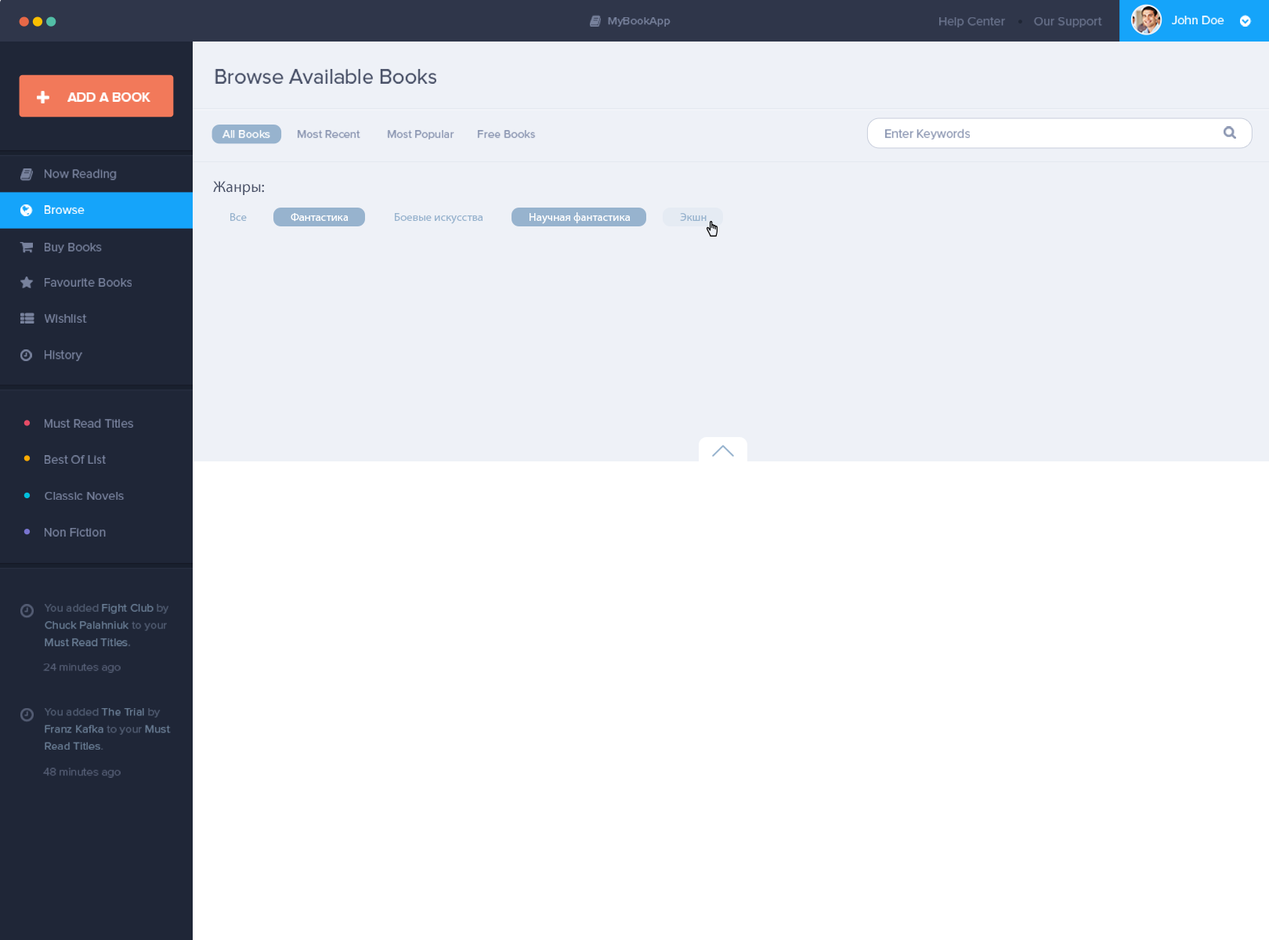
<style>
.page{position:relative;width:1269px;height:940px;background:#ffffff}
.page>*{position:absolute;margin:0}
.t1{font:11.4px "ProximaNova-Regular";color:#78829d}
.t2{font:12.4px "ProximaNova-Regular";color:#78829d}
.t3{font:12.4px "ProximaNova-Regular";color:#ffffff}
.t4{font:21px "ProximaNova-Regular";color:#444c63}
.t5{font:13.3px "ProximaNova-Bold";color:#ffffff;text-transform:uppercase}
.t6{font:11.4px "ProximaNova-Regular";color:#8c97b2}
.t7{font:11.4px "ProximaNova-Regular";color:#ffffff}
.t8{font:12.4px "ProximaNova-Regular";color:#8c97b2}
.t9{font:15.7px "MyriadPro-Regular";color:#495168}
.t10{font:11.4px "MyriadPro-Regular";color:#97b3ce}
.t11{font:11.4px "MyriadPro-Regular";color:#ffffff}
.t12{font:11.4px/17.2px "ProximaNova-Regular";color:#97b3ce}
.t13{font:11.4px/17.2px "ProximaNova-Regular";color:#6f7d95}
.t14{font:11.4px "ProximaNova-Light";color:#545d74}
</style>
<div class="page">
<p class="t1" style="left:608px;top:17px;width:62px;height:10px">MyBookApp</p>
<p class="t2" style="left:939px;top:17px;width:163px;height:10px">Help Center         Our Support</p>
<p class="t3" style="left:1172px;top:16px;width:52px;height:8px">John Doe</p>
<p class="t4" style="left:215px;top:69px;width:221px;height:15px">Browse Available Books</p>
<p class="t5" style="left:67px;top:92px;width:83px;height:10px">Add a Book</p>
<p class="t6" style="left:222px;top:130px;width:314px;height:9px"><span class="t7">All Books       </span>  Most Recent         Most Popular        Free Books</p>
<p class="t8" style="left:885px;top:128px;width:85px;height:11px">Enter Keywords</p>
<p class="t2" style="left:45px;top:168px;width:72px;height:12px">Now Reading</p>
<p class="t9" style="left:213px;top:181px;width:51px;height:14px">Жанры:</p>
<p class="t3" style="left:45px;top:205px;width:40px;height:9px">Browse</p>
<p class="t10" style="left:230px;top:213px;width:17px;height:8px">Все</p>
<p class="t11" style="left:291px;top:213px;width:58px;height:9px">Фантастика</p>
<p class="t10" style="left:395px;top:213px;width:88px;height:11px">Боевые искусства</p>
<p class="t11" style="left:529px;top:212px;width:101px;height:12px">Научная фантастика</p>
<p class="t10" style="left:680px;top:213px;width:26px;height:8px">Экшн</p>
<p class="t2" style="left:45px;top:243px;width:57px;height:10px">Buy Books</p>
<p class="t2" style="left:45px;top:278px;width:87px;height:9px">Favourite Books</p>
<p class="t2" style="left:45px;top:314px;width:42px;height:9px">Wishlist</p>
<p class="t2" style="left:45px;top:350px;width:37px;height:11px">History</p>
<p class="t2" style="left:45px;top:418px;width:89px;height:10px">Must Read Titles</p>
<p class="t2" style="left:45px;top:455px;width:61px;height:9px">Best Of List</p>
<p class="t2" style="left:45px;top:492px;width:80px;height:8px">Classic Novels</p>
<p class="t2" style="left:45px;top:528px;width:61px;height:8px">Non Fiction</p>
<p class="t12" style="left:45px;top:604px;width:123px;height:42px"><span class="t13">You added </span>Fight Club <span class="t13">by </span>Chuck Palahniuk<span class="t13"> to your </span>Must Read Titles<span class="t13">.</span></p>
<p class="t14" style="left:43px;top:663px;width:78px;height:10px">24 minutes ago</p>
<p class="t12" style="left:45px;top:708px;width:126px;height:42px"><span class="t13">You added </span>The Trial <span class="t13">by </span>Franz Kafka <span class="t13">to your </span>Must Read Titles<span class="t13">.</span></p>
<p class="t14" style="left:43px;top:768px;width:78px;height:10px">48 minutes ago</p>
</div>
